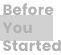
<style>
.page{position:relative;width:61px;height:55px;background:#d1d1d1}
.page>*{position:absolute;margin:0}
.t1{font:15px/18px "Poppins-Bold";letter-spacing:0.02em;color:#b2b2b2}
</style>
<div class="page">
<p class="t1" style="left:2px;top:3px;width:59px;height:48px">Before<br>You<br>Started</p>
</div>
